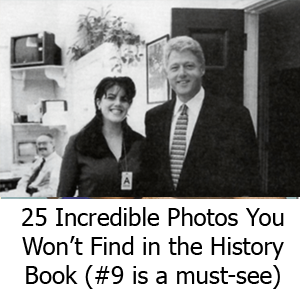
<style>
.page{position:relative;width:300px;height:300px;background:#ffffff}
.page>*{position:absolute;margin:0}
.t1{font:24px "Tahoma";color:#000000}
</style>
<div class="page">
<p class="t1" style="left:22px;top:207px;width:262px;height:82px;text-align:center">25 Incredible Photos You<br>Won’t Find in the History<br>Book (#9 is a must-see)</p>
</div>
